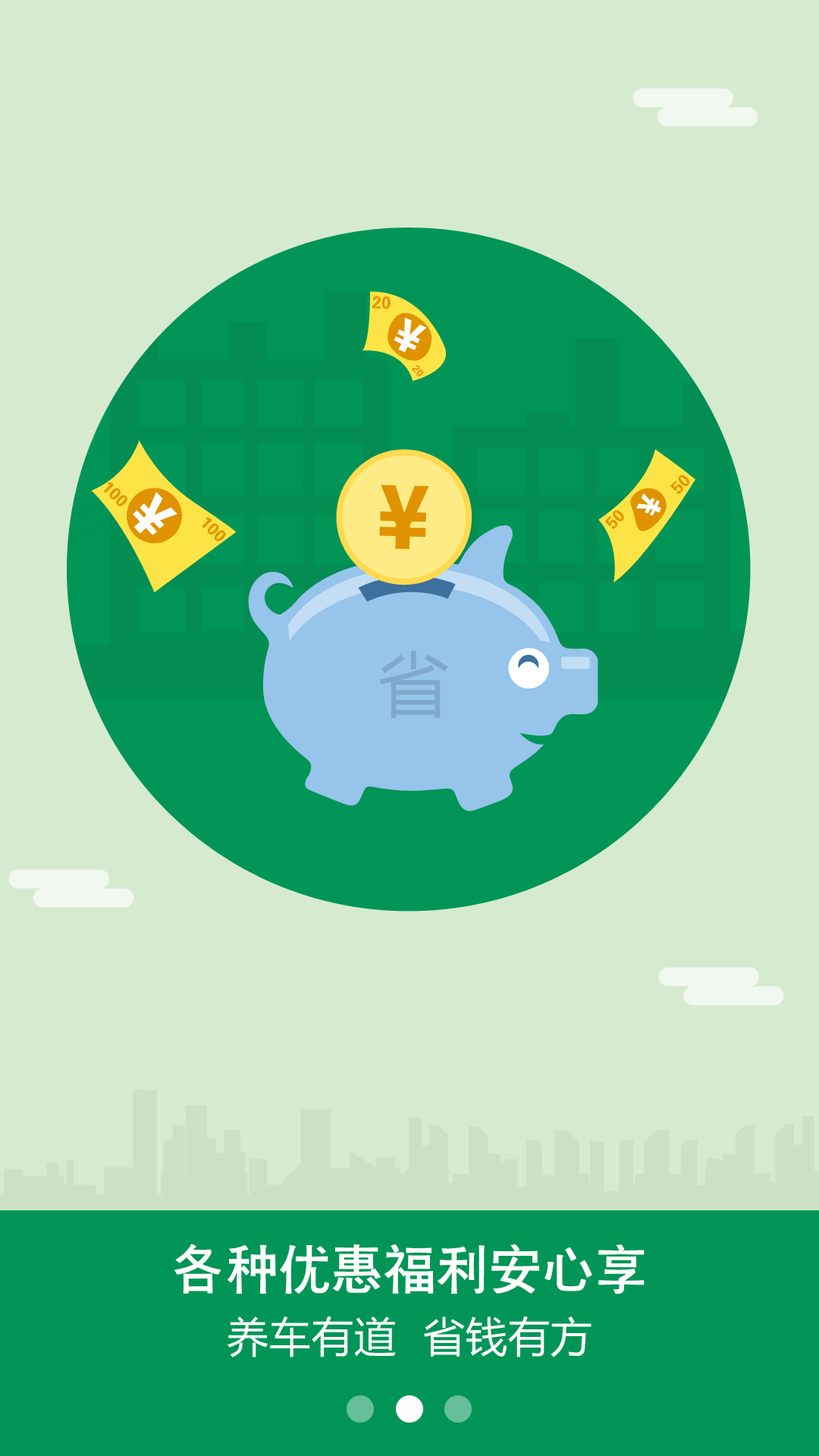
<style>
.page{position:relative;width:819px;height:1456px;background:#d6ead0}
.page>*{position:absolute;margin:0}
.t1{font:17px "FZDHTJW--GB1-0";color:#df9301}
.t2{font:10.2px "FZDHTJW--GB1-0";color:#df9301}
.t3{font:70.5px "MicrosoftYaHei";letter-spacing:0.02em;color:#80a8ca}
.t4{font:51.8px "CTCuHeiSJ";letter-spacing:0.02em;color:#ffffff}
.t5{font:41.7px "MicrosoftYaHei";letter-spacing:0.02em;color:#ffffff}
</style>
<div class="page">
<p class="t1" style="left:372px;top:296px;width:19px;height:13px;rotate:2deg">20</p>
<p class="t2" style="left:412px;top:365px;width:12px;height:12px;rotate:50deg">20</p>
<p class="t1" style="left:670px;top:474px;width:20px;height:20px;rotate:-45deg">50</p>
<p class="t1" style="left:104px;top:482px;width:24px;height:25px;rotate:45deg">100</p>
<p class="t1" style="left:605px;top:510px;width:19px;height:19px;rotate:-45deg">50</p>
<p class="t1" style="left:202px;top:516px;width:24px;height:25px;rotate:45deg">100</p>
<p class="t3" style="left:379px;top:651px;width:69px;height:67px">省</p>
<p class="t4" style="left:174px;top:1244px;width:471px;height:50px">各种优惠福利安心享</p>
<p class="t5" style="left:227px;top:1316px;width:364px;height:41px">养车有道  省钱有方</p>
</div>
